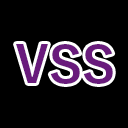
<style>
.page{position:relative;width:128px;height:128px;background:#000000}
.page>*{position:absolute;margin:0}
.t1{font:50px "YuGo-Bold";color:#691b7c}
</style>
<div class="page">
<p class="t1" style="left:16px;top:44px;width:97px;height:40px">VSS</p>
</div>
